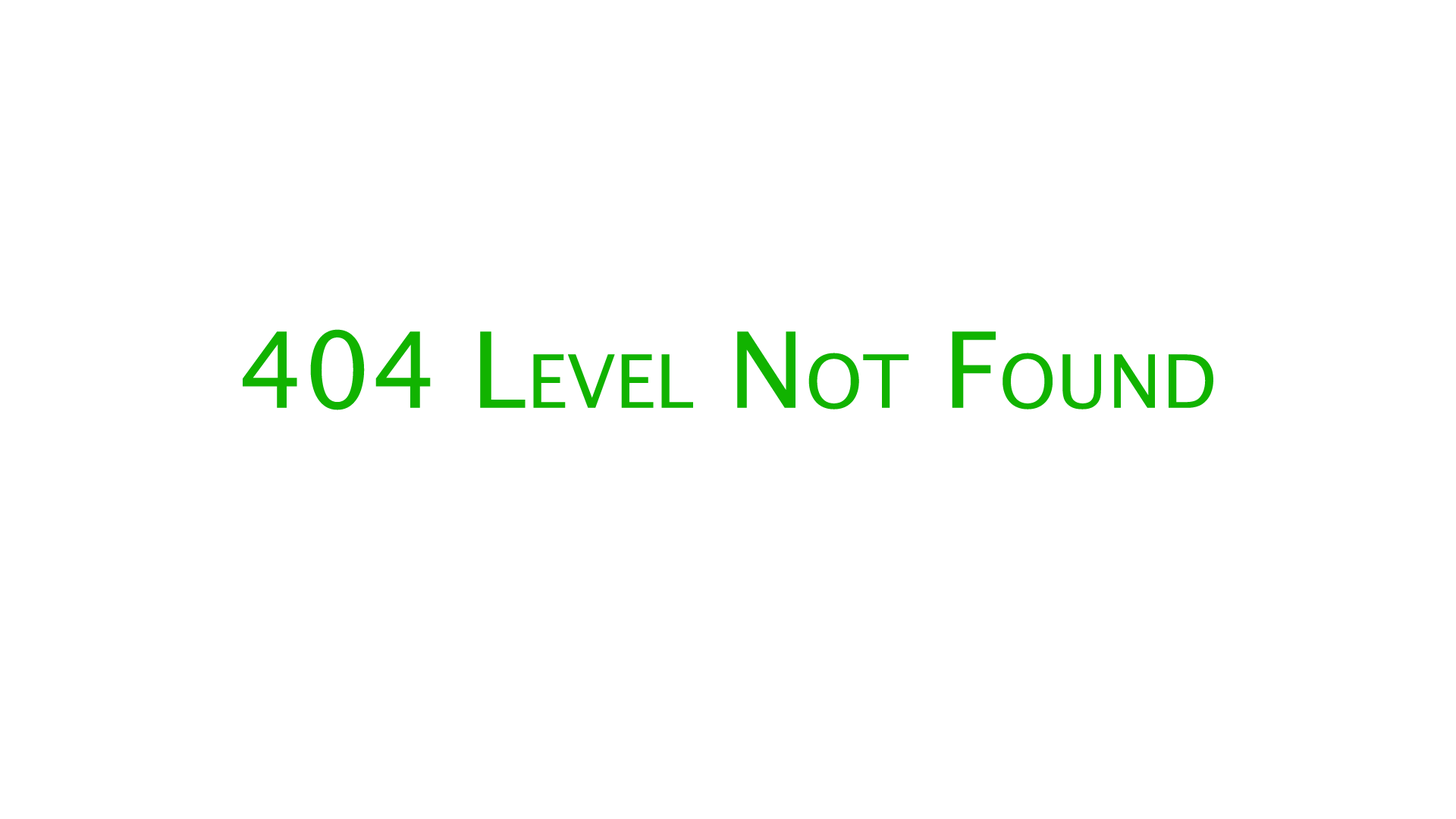
<style>
.page{position:relative;width:1456px;height:819px;background:#ffffff}
.page>*{position:absolute;margin:0}
.t1{font:105.3px "LucidaSans";color:#11b300;font-variant:small-caps}
</style>
<div class="page">
<p class="t1" style="left:243px;top:329px;width:970px;height:81px">404 Level Not Found</p>
</div>
